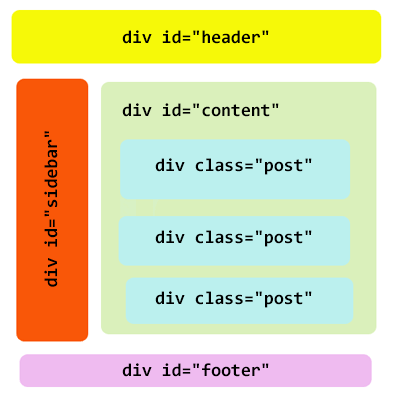
<style>
.page{position:relative;width:400px;height:401px;background:#ffffff}
.page>*{position:absolute;margin:0}
.t1{font:18px "Consolas-Bold";color:#000000}
</style>
<div class="page">
<p class="t1" style="left:122px;top:30px;width:147px;height:14px">div id="header"</p>
<p class="t1" style="left:122px;top:103px;width:157px;height:14px">div id="content"</p>
<p class="t1" style="left:44px;top:131px;width:14px;height:156px;rotate:-90deg">div id="sidebar"</p>
<p class="t1" style="left:155px;top:158px;width:157px;height:17px">div class="post"</p>
<p class="t1" style="left:155px;top:230px;width:157px;height:17px">div class="post"</p>
<p class="t1" style="left:155px;top:291px;width:157px;height:17px">div class="post"</p>
<p class="t1" style="left:122px;top:363px;width:147px;height:14px">div id="footer"</p>
</div>
